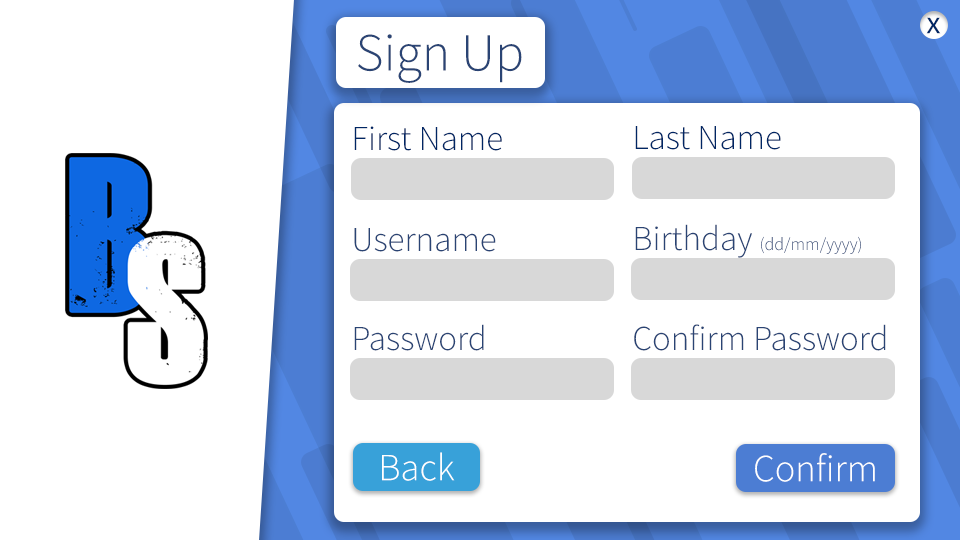
<style>
.page{position:relative;width:960px;height:540px;background:#ffffff}
.page>*{position:absolute;margin:0}
.t1{font:32.1px "SourceSansRoman-Regular";color:#002664}
.t2{font:53.7px "SourceSansRoman-Light";color:#2a4474}
.t3{font:35px "SourceSansRoman-Light";color:#002664}
.t4{font:35px "SourceSansRoman-Light";color:#2a4474}
.t5{font:18px "SourceSansRoman-Light";color:#2a4474}
.t6{font:38.5px "SourceSansRoman-Light";color:#ffffff}
</style>
<div class="page">
<p class="t1" style="left:926px;top:17px;width:15px;height:17px">x</p>
<p class="t2" style="left:358px;top:34px;width:164px;height:49px">Sign Up</p>
<p class="t3" style="left:354px;top:126px;width:148px;height:25px">First Name</p>
<p class="t3" style="left:635px;top:126px;width:146px;height:24px">Last Name</p>
<p class="t4" style="left:354px;top:228px;width:142px;height:24px">Username</p>
<p class="t5" style="left:635px;top:224px;width:226px;height:34px"><span class="t4">Birthday </span>(dd/mm/yyyy)</p>
<p class="t4" style="left:354px;top:324px;width:130px;height:27px">Password</p>
<p class="t4" style="left:634px;top:324px;width:252px;height:27px">Confirm Password</p>
<p class="t6" style="left:382px;top:452px;width:73px;height:29px">Back</p>
<p class="t6" style="left:755px;top:453px;width:120px;height:29px">Confirm</p>
</div>
